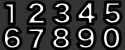
<style>
.page{position:relative;width:125px;height:50px;background:#333333}
.page>*{position:absolute;margin:0}
.t1{font:24px "HiraKakuStd-W8"}
.t2{font:25px "HiraKakuStd-W8"}
</style>
<div class="page">
<p class="t1" style="left:5px;top:2px;width:10px;height:22px">1</p>
<p class="t2" style="left:27px;top:2px;width:18px;height:23px">2</p>
<p class="t2" style="left:53px;top:2px;width:18px;height:22px">3</p>
<p class="t2" style="left:77px;top:2px;width:19px;height:22px">4</p>
<p class="t2" style="left:104px;top:2px;width:17px;height:22px">5</p>
<p class="t2" style="left:3px;top:27px;width:18px;height:22px">6</p>
<p class="t1" style="left:28px;top:27px;width:17px;height:22px">7</p>
<p class="t2" style="left:52px;top:27px;width:18px;height:22px">8</p>
<p class="t2" style="left:77px;top:27px;width:18px;height:22px">9</p>
<p class="t2" style="left:102px;top:27px;width:19px;height:22px">0</p>
</div>
